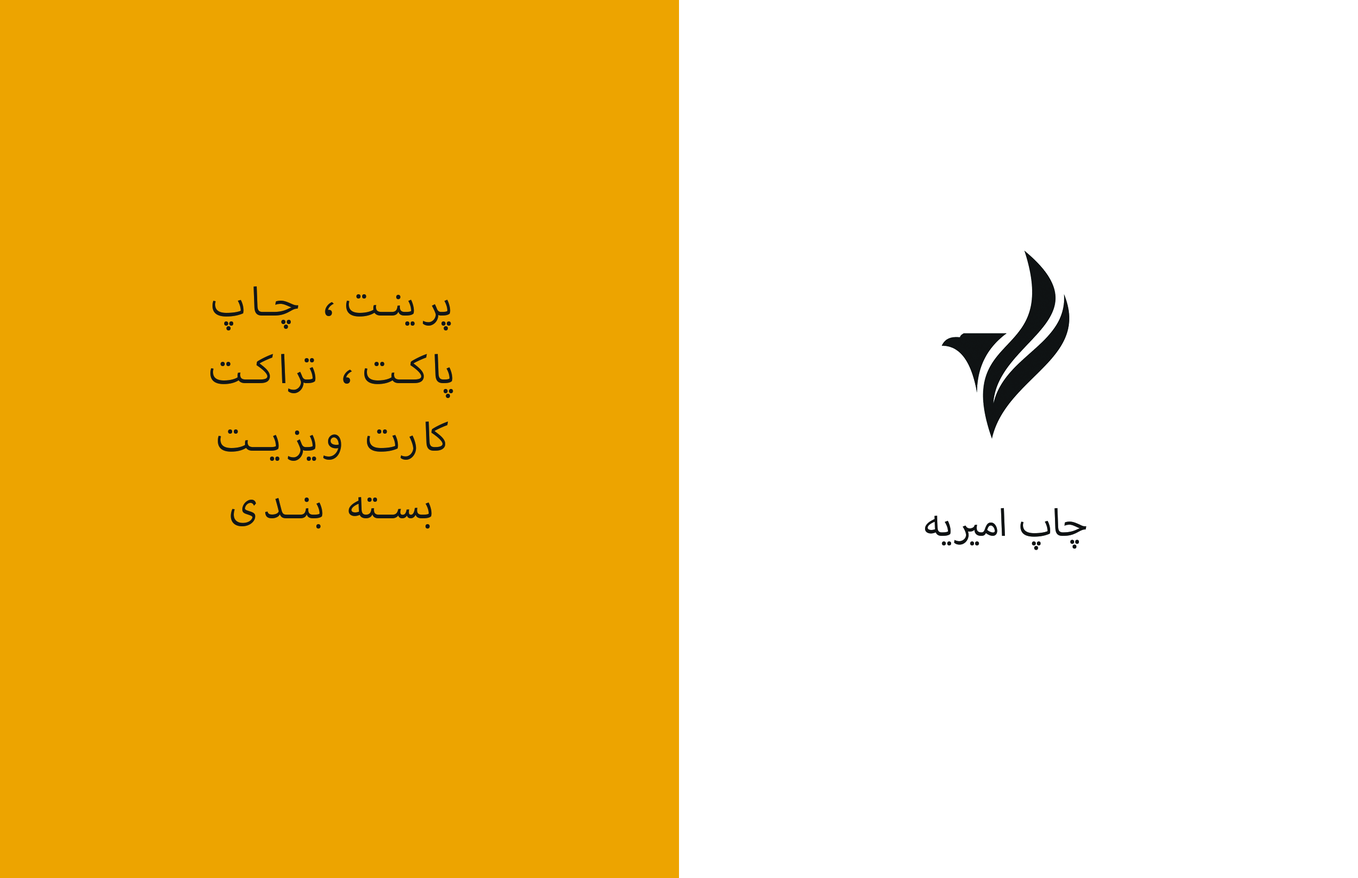
<style>
.page{position:relative;width:1358px;height:878px;background:#ffffff}
.page>*{position:absolute;margin:0}
.t1{font:56.3px "MyriadArabic-Regular";letter-spacing:0.1em;color:#121617}
.t2{font:53.6px "MyriadArabic-Regular";color:#0f1213}
</style>
<div class="page">
<p class="t1" style="left:210px;top:286px;width:243px;height:243px;text-align:center">پرینت، چاپ<br>پاکت، تراکت<br>کارت ویزیت<br>بسته بندی</p>
<p class="t2" style="left:925px;top:508px;width:161px;height:42px">چاپ امیریه</p>
</div>
